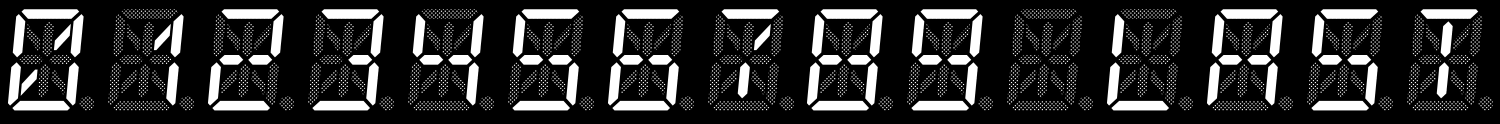
<style>
.page{position:relative;width:1500px;height:124px;background:#000000}
.page>*{position:absolute;margin:0}
.t1{font:186.5px "14SegmentLED";color:#000000;text-transform:uppercase}
</style>
<div class="page">
<p class="t1" style="left:0px;top:0px;width:1501px;height:125px">0123456789_LAST</p>
</div>
